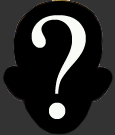
<style>
.page{position:relative;width:115px;height:135px;background:#000000}
.page>*{position:absolute;margin:0}
.t1{font:150px "TimesNewRomanPSMT";color:#f9fbf7}
</style>
<div class="page">
<p class="t1" style="left:31px;top:15px;width:55px;height:104px">?</p>
</div>
